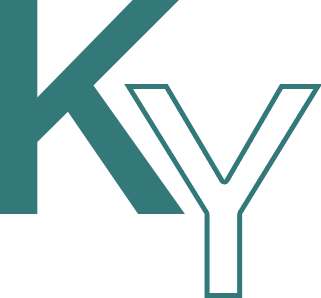
<style>
.page{position:relative;width:321px;height:298px;background:#ffffff}
.page>*{position:absolute;margin:0}
.t1{font:300px "HelveticaNeue-Medium";letter-spacing:0.025em;color:#347979}
</style>
<div class="page">
<p class="t1" style="left:0px;top:0px;width:185px;height:214px">K</p>
</div>
